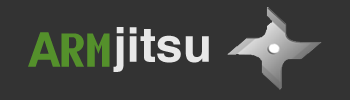
<style>
.page{position:relative;width:350px;height:100px;background:#333333}
.page>*{position:absolute;margin:0}
.t1{font:48px "Helvetica-Bold";color:#e8e8e8}
.t2{font:48px "EnvyCodeR-Bold";color:#54902b}
.t3{font:48px "Helvetica-Bold";color:#54902b}
</style>
<div class="page">
<p class="t1" style="left:113px;top:27px;width:96px;height:45px">jitsu</p>
<p class="t2" style="left:28px;top:32px;width:82px;height:35px"><span class="t3">A</span>RM</p>
</div>
